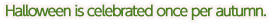
<style>
.page{position:relative;width:271px;height:23px;background:#ffffff}
.page>*{position:absolute;margin:0}
.t1{font:14px "UDShinGoPro-Regular";letter-spacing:-0.09em;color:#4e8120;font-weight:bold}
</style>
<div class="page">
<p class="t1" style="left:6px;top:4px;width:260px;height:16px">Halloween is celebrated once per autumn.</p>
</div>
